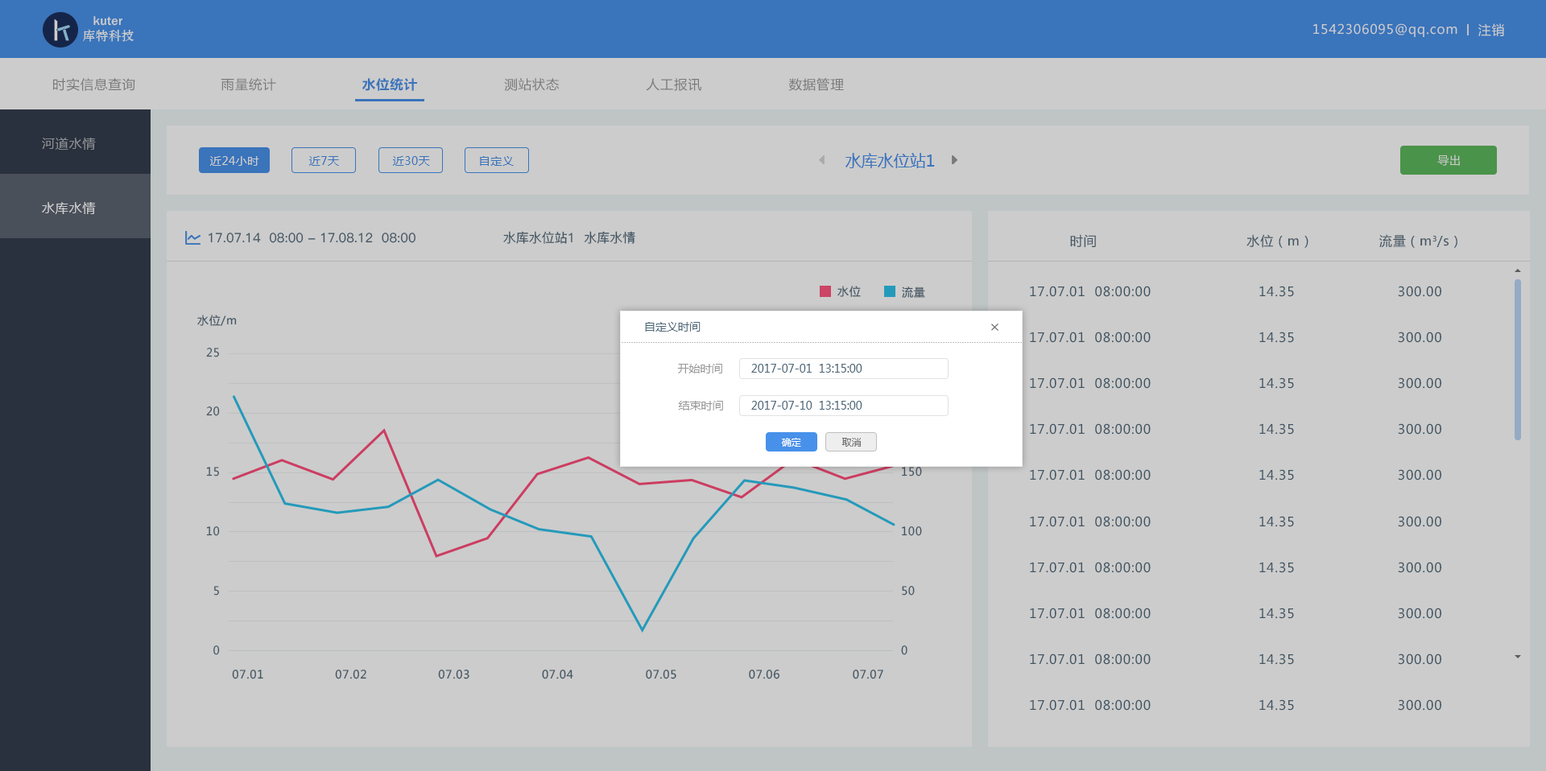
<style>
.page{position:relative;width:1546px;height:771px;background:#cccccc}
.page>*{position:absolute;margin:0}
.t1{font:12.9px "MicrosoftYaHei";letter-spacing:0.05em;color:#cccccc}
.t2{font:12.9px "MicrosoftYaHei";letter-spacing:0.05em;color:#7a7a7a}
.t3{font:12.9px "MicrosoftYaHei-Bold";letter-spacing:0.05em;color:#3a74bb}
.t4{font:12.9px "MicrosoftYaHei";letter-spacing:0.05em;color:#8b8d91}
.t5{font:11.3px "MicrosoftYaHei";letter-spacing:0.05em;color:#cccccc}
.t6{font:11.3px "MicrosoftYaHei";letter-spacing:0.05em;color:#3a74bb}
.t7{font:16.1px "MicrosoftYaHei";color:#3a74bb}
.t8{font:12.9px "PingFang-SC-Medium";color:#50697a}
.t9{font:12.9px "MicrosoftYaHei";letter-spacing:0.05em;color:#50697a}
.t10{font:11.3px "MicrosoftYaHei";letter-spacing:0.05em;color:#50697a;text-transform:uppercase}
.t11{font:11.3px "MicrosoftYaHei";letter-spacing:0.05em;color:#50697a}
.t12{font:11.3px "MicrosoftYaHei";color:#50697a}
.t13{font:11.3px "MicrosoftYaHei";color:#999999}
.t14{font:9.7px "MicrosoftYaHei";color:#ffffff}
.t15{font:9.7px "MicrosoftYaHei";color:#696969}
.t16{font:11.3px "MicrosoftYaHei";letter-spacing:0.05em;color:#3f5360;text-transform:uppercase}
</style>
<div class="page">
<p class="t1" style="left:1313px;top:23px;width:144px;height:14px">1542306095@qq.com</p>
<p class="t1" style="left:1478px;top:23px;width:26px;height:13px">注销</p>
<p class="t2" style="left:53px;top:78px;width:82px;height:13px">时实信息查询</p>
<p class="t2" style="left:221px;top:78px;width:55px;height:13px">雨量统计</p>
<p class="t3" style="left:362px;top:78px;width:55px;height:13px">水位统计</p>
<p class="t2" style="left:504px;top:78px;width:56px;height:13px">测站状态</p>
<p class="t2" style="left:646px;top:78px;width:55px;height:13px">人工报讯</p>
<p class="t2" style="left:788px;top:78px;width:56px;height:13px">数据管理</p>
<p class="t4" style="left:42px;top:138px;width:54px;height:12px">河道水情</p>
<p class="t5" style="left:210px;top:156px;width:49px;height:10px">近24小时</p>
<p class="t6" style="left:309px;top:156px;width:30px;height:10px">近7天</p>
<p class="t6" style="left:393px;top:156px;width:37px;height:10px">近30天</p>
<p class="t6" style="left:480px;top:156px;width:34px;height:10px">自定义</p>
<p class="t7" style="left:845px;top:153px;width:90px;height:15px">水库水位站1</p>
<p class="t5" style="left:1437px;top:155px;width:23px;height:11px">导出</p>
<p class="t1" style="left:42px;top:202px;width:54px;height:12px">水库水情</p>
<p class="t8" style="left:209px;top:233px;width:206px;height:10px">17.07.14  08:00 - 17.08.12  08:00</p>
<p class="t8" style="left:503px;top:231px;width:132px;height:13px">水库水位站1  水库水情</p>
<p class="t9" style="left:1070px;top:234px;width:387px;height:14px">时间                                水位（m）              流量（m3/s）</p>
<p class="t10" style="left:837px;top:286px;width:24px;height:11px">水位</p>
<p class="t10" style="left:902px;top:287px;width:23px;height:11px">流量</p>
<p class="t9" style="left:1030px;top:286px;width:411px;height:11px">17.07.01  08:00:00                        14.35                       300.00</p>
<p class="t10" style="left:197px;top:315px;width:40px;height:11px">水位/<span class="t11">m</span></p>
<p class="t12" style="left:645px;top:322px;width:55px;height:10px">自定义时间</p>
<p class="t9" style="left:1030px;top:332px;width:411px;height:11px">17.07.01  08:00:00                        14.35                       300.00</p>
<p class="t10" style="left:206px;top:348px;width:13px;height:9px">25</p>
<p class="t13" style="left:677px;top:364px;width:45px;height:10px">开始时间</p>
<p class="t12" style="left:751px;top:364px;width:111px;height:9px">2017-07-01  13:15:00</p>
<p class="t9" style="left:1030px;top:378px;width:411px;height:11px">17.07.01  08:00:00                        14.35                       300.00</p>
<p class="t13" style="left:678px;top:401px;width:45px;height:10px">结束时间</p>
<p class="t12" style="left:751px;top:401px;width:111px;height:9px">2017-07-10  13:15:00</p>
<p class="t10" style="left:206px;top:407px;width:14px;height:9px">20</p>
<p class="t9" style="left:1030px;top:424px;width:411px;height:11px">17.07.01  08:00:00                        14.35                       300.00</p>
<p class="t14" style="left:781px;top:438px;width:20px;height:9px">确定</p>
<p class="t15" style="left:841px;top:438px;width:20px;height:9px">取消</p>
<p class="t10" style="left:206px;top:467px;width:13px;height:10px">15</p>
<p class="t16" style="left:902px;top:467px;width:20px;height:10px">150</p>
<p class="t9" style="left:1030px;top:469px;width:411px;height:12px">17.07.01  08:00:00                        14.35                       300.00</p>
<p class="t9" style="left:1030px;top:516px;width:411px;height:11px">17.07.01  08:00:00                        14.35                       300.00</p>
<p class="t10" style="left:206px;top:527px;width:14px;height:9px">10</p>
<p class="t10" style="left:902px;top:527px;width:20px;height:9px">100</p>
<p class="t9" style="left:1030px;top:562px;width:411px;height:11px">17.07.01  08:00:00                        14.35                       300.00</p>
<p class="t10" style="left:213px;top:586px;width:6px;height:10px">5</p>
<p class="t10" style="left:902px;top:586px;width:13px;height:10px">50</p>
<p class="t9" style="left:1030px;top:608px;width:411px;height:11px">17.07.01  08:00:00                        14.35                       300.00</p>
<p class="t10" style="left:213px;top:646px;width:7px;height:9px">0</p>
<p class="t10" style="left:901px;top:646px;width:6px;height:9px">0</p>
<p class="t9" style="left:1030px;top:654px;width:411px;height:11px">17.07.01  08:00:00                        14.35                       300.00</p>
<p class="t10" style="left:232px;top:670px;width:31px;height:10px">07.01</p>
<p class="t10" style="left:335px;top:670px;width:31px;height:10px">07.02</p>
<p class="t10" style="left:438px;top:670px;width:31px;height:10px">07.03</p>
<p class="t10" style="left:542px;top:670px;width:31px;height:10px">07.04</p>
<p class="t10" style="left:646px;top:670px;width:30px;height:10px">07.05</p>
<p class="t10" style="left:749px;top:670px;width:30px;height:10px">07.06</p>
<p class="t10" style="left:853px;top:670px;width:30px;height:10px">07.07</p>
<p class="t9" style="left:1030px;top:700px;width:411px;height:11px">17.07.01  08:00:00                        14.35                       300.00</p>
</div>
